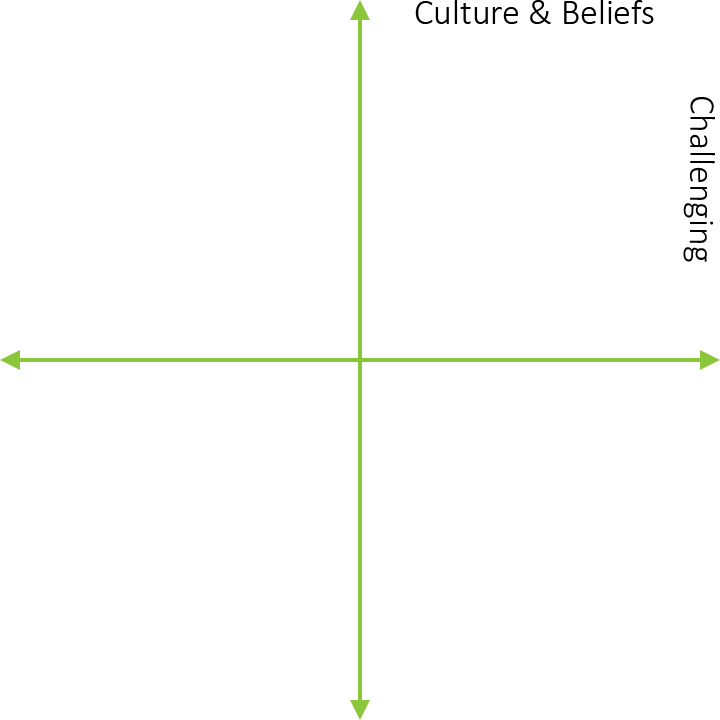
<style>
.page{position:relative;width:720px;height:720px;background:#ffffff}
.page>*{position:absolute;margin:0}
.t1{font:36px "Calibri-Light";color:#000000}
</style>
<div class="page">
<p class="t1" style="left:415px;top:0px;width:239px;height:24px">Culture &amp; Beliefs</p>
<p class="t1" style="left:683px;top:97px;width:32px;height:165px;rotate:90deg">Challenging</p>
</div>
